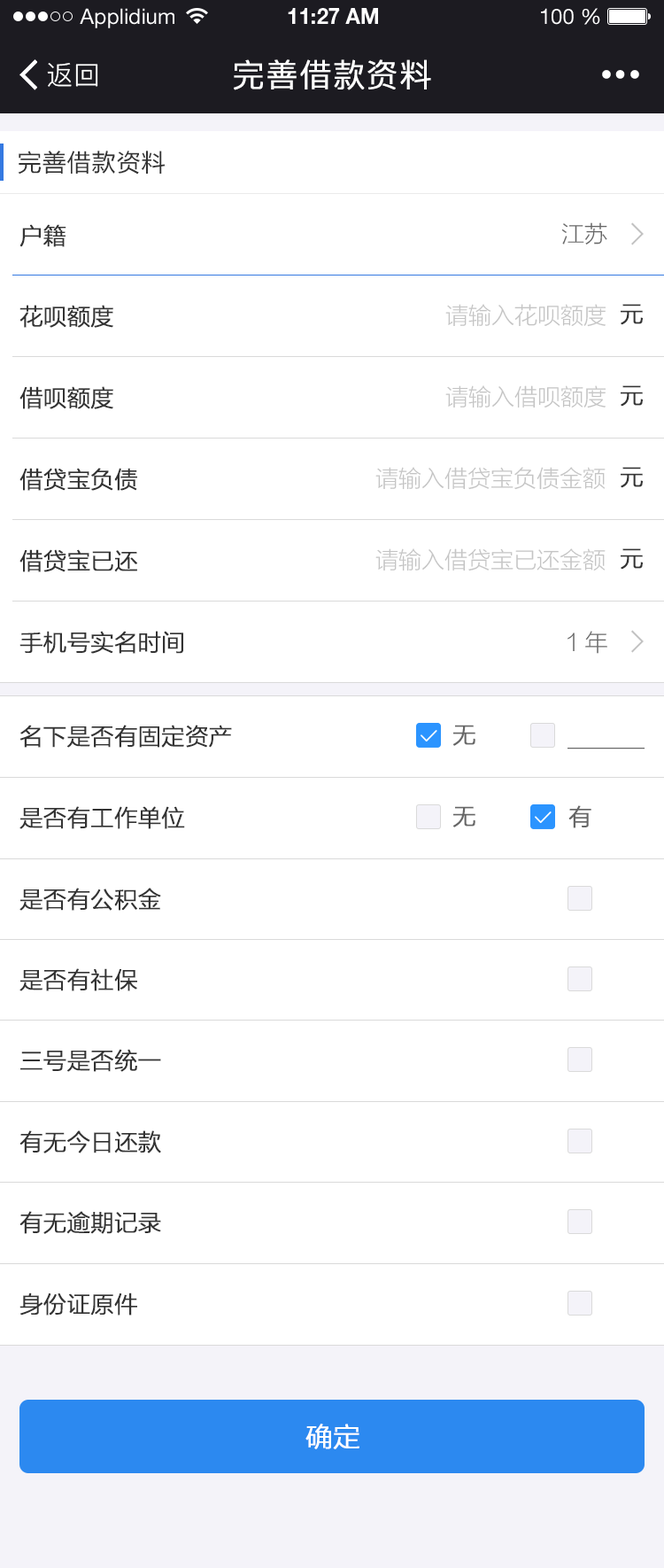
<style>
.page{position:relative;width:664px;height:1568px;background:#ffffff}
.page>*{position:absolute;margin:0}
.t1{font:21.3px "HelveticaNeueLTStd-Roman";color:#ffffff}
.t2{font:21.3px "HelveticaNeueLTStd-Bd";color:#ffffff}
.t3{font:26.6px "PingFang-SC-Regular";letter-spacing:0.025em;color:#ffffff}
.t4{font:31.9px "PingFang-SC-Regular";letter-spacing:0.025em;color:#ffffff;font-weight:bold}
.t5{font:24.8px "FZLTH_YS_GBK";color:#333333}
.t6{font:23px "FZLTXHK--GBK1-0";color:#333333;font-weight:bold}
.t7{font:23px "FZLTXHK--GBK1-0";color:#666666}
.t8{font:23px "FZLTXHK--GBK1-0";color:#c4c4c4}
.t9{font:23px "FZLTXHK--GBK1-0";color:#666666;font-weight:bold}
.t10{font:26.6px "FZLTXHK--GBK1-0";color:#ffffff;font-weight:bold}
</style>
<div class="page">
<p class="t1" style="left:80px;top:8px;width:95px;height:20px">Applidium</p>
<p class="t2" style="left:288px;top:8px;width:90px;height:16px">11:27 AM</p>
<p class="t1" style="left:541px;top:8px;width:60px;height:17px">100 %</p>
<p class="t3" style="left:47px;top:63px;width:51px;height:24px">返回</p>
<p class="t4" style="left:234px;top:59px;width:197px;height:31px">完善借款资料</p>
<p class="t5" style="left:18px;top:151px;width:148px;height:24px">完善借款资料</p>
<p class="t6" style="left:19px;top:224px;width:47px;height:23px">户籍</p>
<p class="t7" style="left:562px;top:222px;width:46px;height:23px">江苏</p>
<p class="t6" style="left:19px;top:305px;width:94px;height:23px">花呗额度</p>
<p class="t8" style="left:446px;top:304px;width:160px;height:23px">请输入花呗额度</p>
<p class="t6" style="left:621px;top:304px;width:22px;height:21px">元</p>
<p class="t6" style="left:19px;top:386px;width:94px;height:23px">借呗额度</p>
<p class="t8" style="left:446px;top:385px;width:160px;height:23px">请输入借呗额度</p>
<p class="t6" style="left:621px;top:385px;width:22px;height:22px">元</p>
<p class="t6" style="left:19px;top:468px;width:118px;height:23px">借贷宝负债</p>
<p class="t8" style="left:376px;top:467px;width:230px;height:23px">请输入借贷宝负债金额</p>
<p class="t6" style="left:621px;top:467px;width:22px;height:21px">元</p>
<p class="t6" style="left:19px;top:549px;width:118px;height:23px">借贷宝已还</p>
<p class="t8" style="left:376px;top:548px;width:230px;height:23px">请输入借贷宝已还金额</p>
<p class="t6" style="left:621px;top:548px;width:22px;height:22px">元</p>
<p class="t6" style="left:19px;top:631px;width:164px;height:23px">手机号实名时间</p>
<p class="t7" style="left:568px;top:631px;width:40px;height:23px">1年</p>
<p class="t6" style="left:19px;top:725px;width:213px;height:23px">名下是否有固定资产</p>
<p class="t9" style="left:454px;top:725px;width:22px;height:21px">无</p>
<p class="t6" style="left:19px;top:806px;width:166px;height:23px">是否有工作单位</p>
<p class="t9" style="left:454px;top:806px;width:22px;height:21px">无</p>
<p class="t9" style="left:569px;top:805px;width:23px;height:23px">有</p>
<p class="t6" style="left:19px;top:888px;width:142px;height:23px">是否有公积金</p>
<p class="t6" style="left:19px;top:968px;width:118px;height:23px">是否有社保</p>
<p class="t6" style="left:20px;top:1049px;width:141px;height:23px">三号是否统一</p>
<p class="t6" style="left:19px;top:1130px;width:142px;height:23px">有无今日还款</p>
<p class="t6" style="left:19px;top:1211px;width:142px;height:23px">有无逾期记录</p>
<p class="t6" style="left:19px;top:1292px;width:118px;height:24px">身份证原件</p>
<p class="t10" style="left:306px;top:1424px;width:54px;height:25px">确定</p>
</div>
